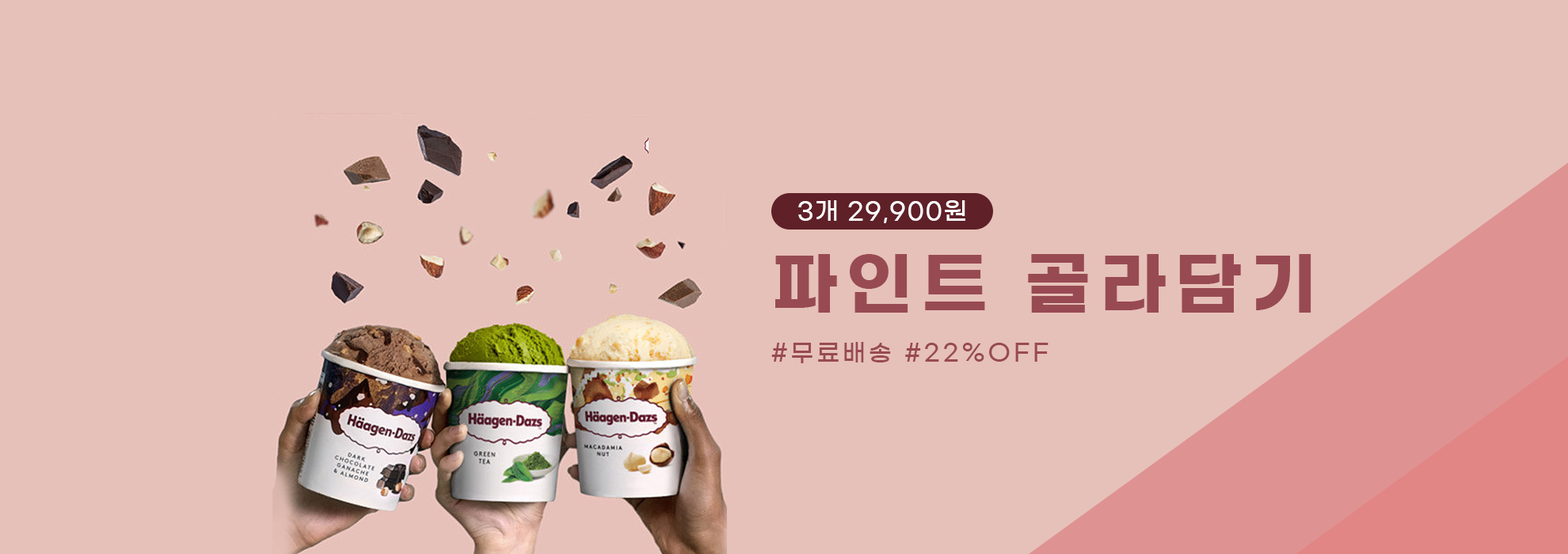
<style>
.page{position:relative;width:1568px;height:554px;background:#e6c1b9}
.page>*{position:absolute;margin:0}
.t1{font:24.5px "GmarketSansTTFMedium";letter-spacing:0.05em;color:#ffffff}
.t2{font:68.9px "GmarketSansTTFBold";letter-spacing:0.13em;color:#984a53}
.t3{font:23.8px "GmarketSansTTFMedium";letter-spacing:0.13em;color:#984a53}
</style>
<div class="page">
<p class="t1" style="left:798px;top:200px;width:167px;height:23px">3개 29,900원</p>
<p class="t2" style="left:775px;top:254px;width:536px;height:59px">파인트 골라담기</p>
<p class="t3" style="left:771px;top:342px;width:278px;height:21px">#무료배송 #22%OFF</p>
</div>
